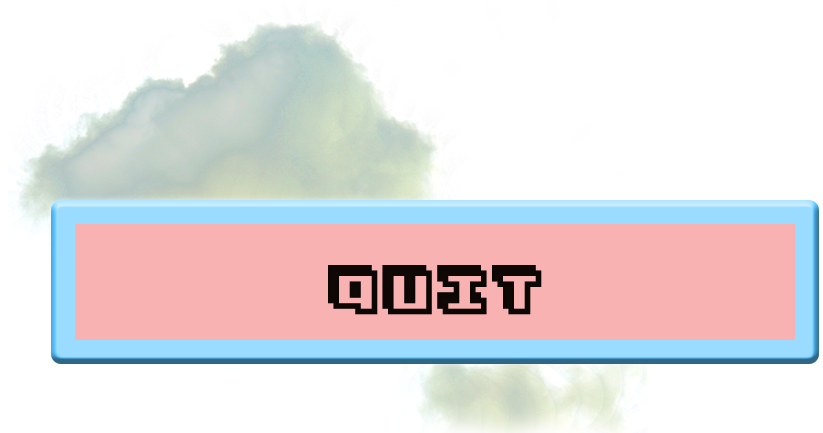
<style>
.page{position:relative;width:823px;height:433px;background:#ffffff}
.page>*{position:absolute;margin:0}
.t1{font:87.5px "3Dventure";color:#130a06}
</style>
<div class="page">
<p class="t1" style="left:328px;top:265px;width:214px;height:50px">QUIT</p>
</div>
